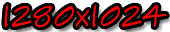
<style>
.page{position:relative;width:170px;height:32px;background:#000000}
.page>*{position:absolute;margin:0}
.t1{font:33.3px "SketchFlowPrint";color:#ff0000}
</style>
<div class="page">
<p class="t1" style="left:4px;top:5px;width:163px;height:22px">1280x1024</p>
<p class="t1" style="left:4px;top:5px;width:163px;height:22px">1280x1024</p>
</div>
